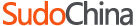
<style>
.page{position:relative;width:136px;height:26px;background:#ffffff}
.page>*{position:absolute;margin:0}
.t1{font:29px "MicrosoftYaHei";letter-spacing:-0.1em;color:#4c4d50;font-weight:bold}
.t2{font:29px "MicrosoftYaHei";letter-spacing:-0.1em;color:#f65315;font-weight:bold}
</style>
<div class="page">
<p class="t1" style="left:3px;top:1px;width:130px;height:25px"><span class="t2">Sudo</span>China</p>
</div>
